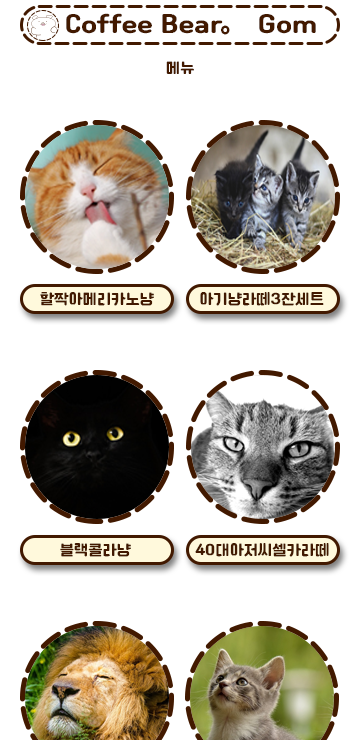
<style>
.page{position:relative;width:360px;height:740px;background:#ffffff}
.page>*{position:absolute;margin:0}
.t1{font:25px "Cafe24Ssurround";color:#421900}
.t2{font:25px "NotoSansKR-Black";color:#421900}
.t3{font:15px "Cafe24Ssurround";color:#421900}
</style>
<div class="page">
<p class="t1" style="left:66px;top:13px;width:250px;height:21px">Coffee Bear 。Gom</p>
<p class="t2" style="left:221px;top:25px;width:9px;height:10px">。</p>
<p class="t3" style="left:166px;top:61px;width:28px;height:13px">메뉴</p>
<p class="t3" style="left:40px;top:292px;width:114px;height:14px">할짝아메리카노냥</p>
<p class="t3" style="left:200px;top:292px;width:124px;height:14px">아기냥라떼3잔세트</p>
<p class="t3" style="left:60px;top:543px;width:71px;height:14px">블랙콜라냥</p>
<p class="t3" style="left:195px;top:543px;width:134px;height:14px">40대아저씨셀카라떼</p>
</div>
